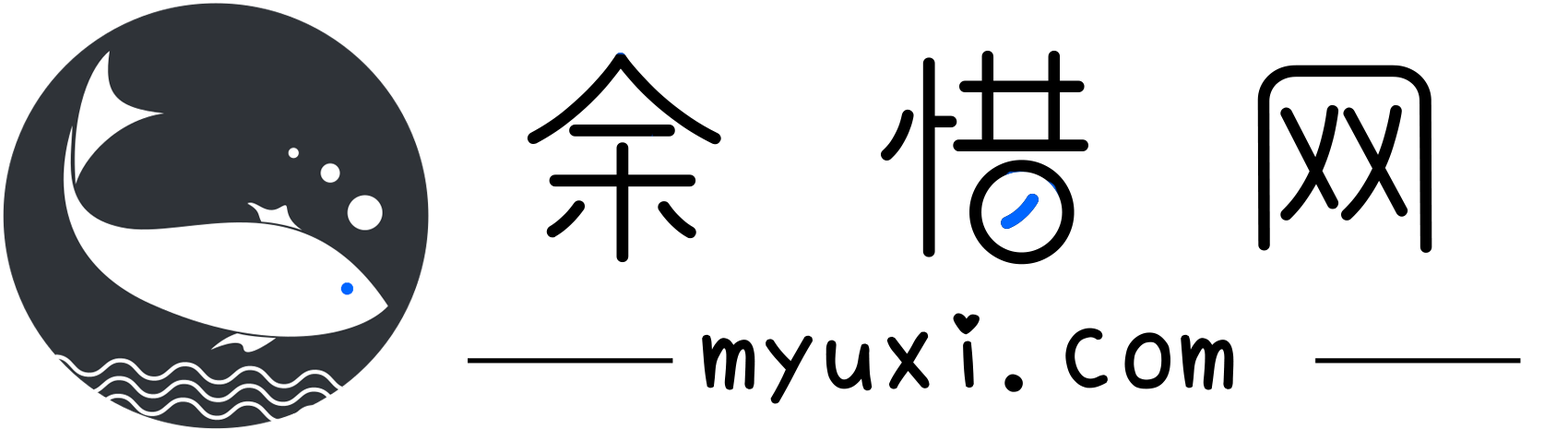
<style>
.page{position:relative;width:1568px;height:430px;background:#ffffff}
.page>*{position:absolute;margin:0}
.t1{font:66.4px "HYYouYuanTiW";color:#000000;font-weight:bold}
.t2{font:113.8px "SetoFont";color:#000000;font-weight:bold}
</style>
<div class="page">
<p class="t1" style="left:527px;top:50px;width:905px;height:215px">余 惜 网</p>
<p class="t2" style="left:702px;top:313px;width:532px;height:91px">myuxi.com</p>
</div>
